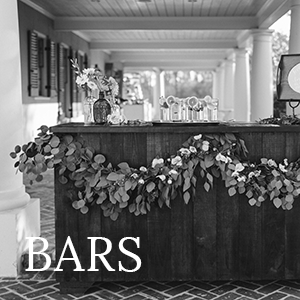
<style>
.page{position:relative;width:300px;height:300px}
.page>*{position:absolute;margin:0}
.t1{font:47.6px "Lora-Regular";letter-spacing:0.025em;color:#ffffff}
</style>
<div class="page">
<p class="t1" style="left:25px;top:236px;width:117px;height:36px">BARS</p>
</div>
